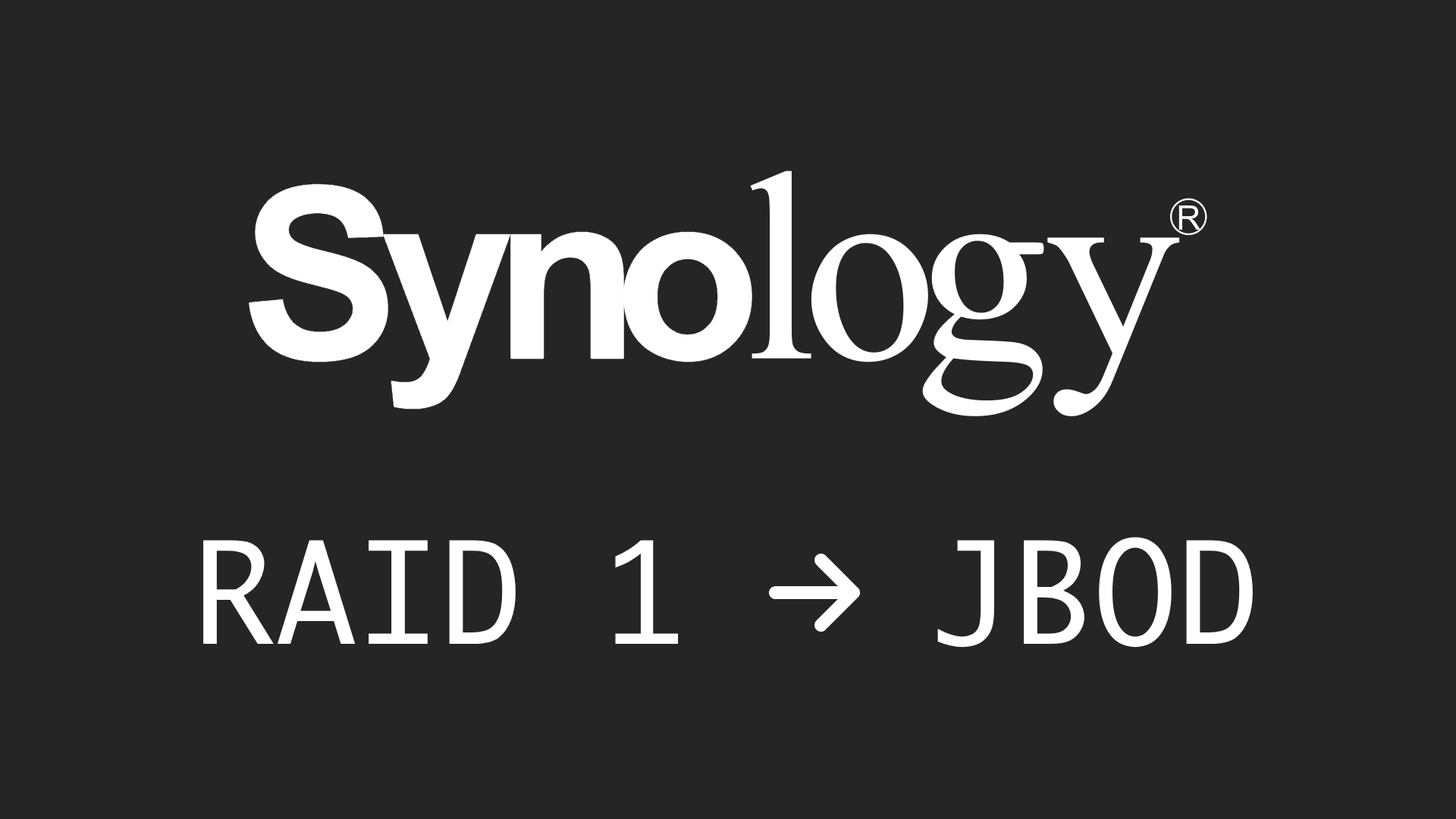
<style>
.page{position:relative;width:1456px;height:819px;background:#252525}
.page>*{position:absolute;margin:0}
.t1{font:136.5px "Monaco";color:#ffffff}
</style>
<div class="page">
<p class="t1" style="left:203px;top:537px;width:1050px;height:111px">RAID 1   JBOD</p>
</div>
